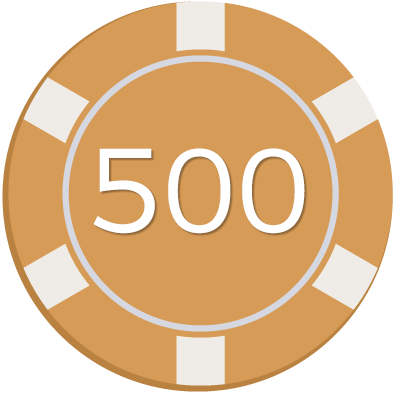
<style>
.page{position:relative;width:393px;height:393px;background:#d69b56}
.page>*{position:absolute;margin:0}
.t1{font:120px "Montserrat-Light";color:#ffffff}
</style>
<div class="page">
<p class="t1" style="left:93px;top:148px;width:212px;height:86px">500</p>
</div>
